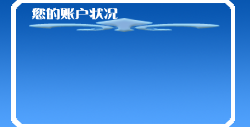
<style>
.page{position:relative;width:250px;height:127px}
.page>*{position:absolute;margin:0}
.t1{font:12px "DFPYaSongW9";color:#fffefe;scale:1.2 1}
</style>
<div class="page">
<p class="t1" style="left:32px;top:7px;width:86px;height:13px">您的账户状况</p>
</div>
